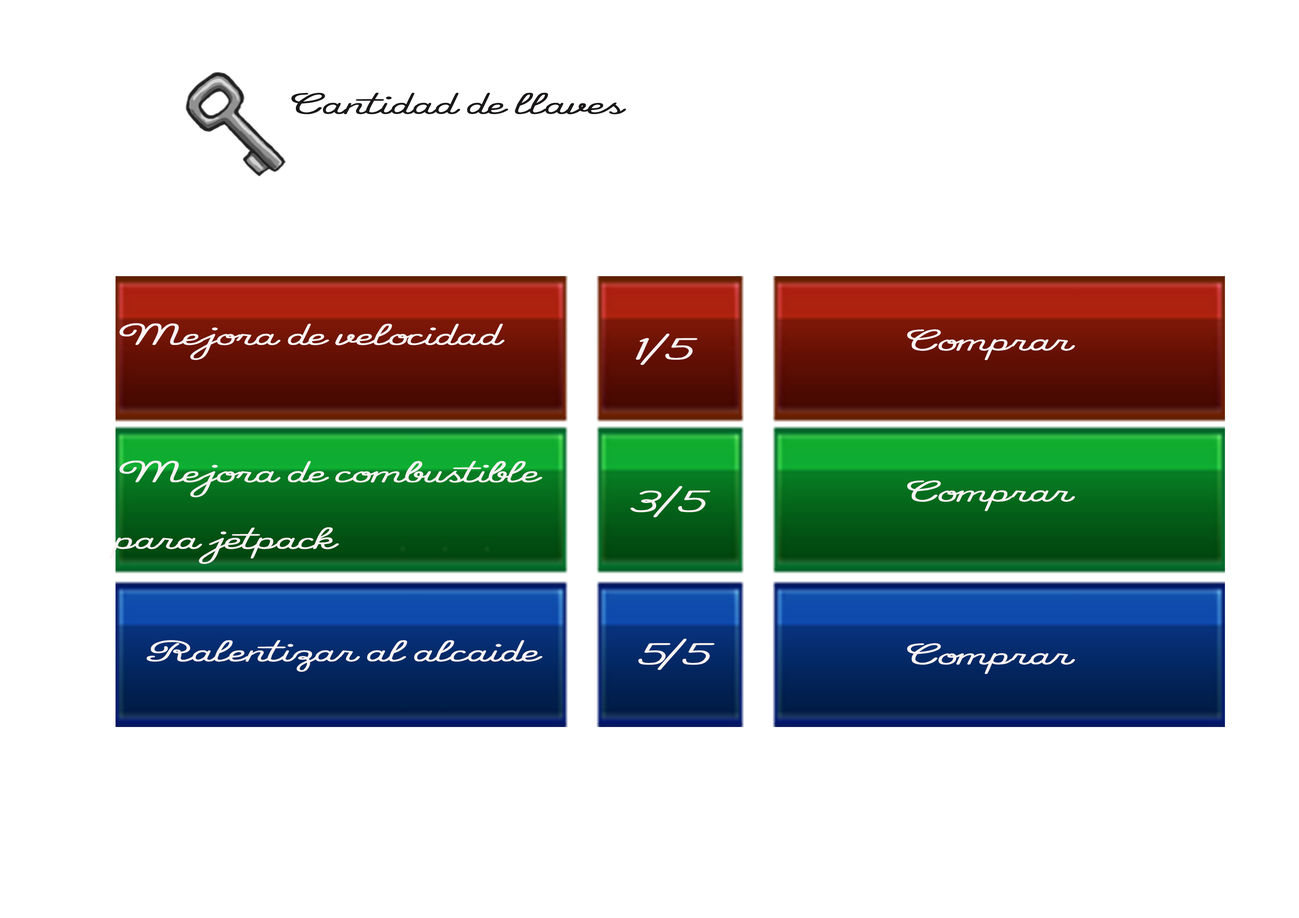
<style>
.page{position:relative;width:1299px;height:918px;background:#ffffff}
.page>*{position:absolute;margin:0}
.t1{font:27.8px "ThatsFontFolksItalic";color:#191717;scale:2 1}
.t2{font:27.8px "ThatsFontFolksItalic";color:#faf3f3;scale:2 1}
</style>
<div class="page">
<p class="t1" style="left:291px;top:93px;width:335px;height:21px">Cantidad de llaves</p>
<p class="t2" style="left:119px;top:323px;width:386px;height:37px">Mejora de velocidad</p>
<p class="t2" style="left:907px;top:329px;width:168px;height:31px">Comprar</p>
<p class="t2" style="left:636px;top:334px;width:61px;height:31px">1/5</p>
<p class="t2" style="left:109px;top:461px;width:433px;height:103px">Mejora de combustible<br>para jetpack</p>
<p class="t2" style="left:907px;top:480px;width:168px;height:31px">Comprar</p>
<p class="t2" style="left:630px;top:486px;width:80px;height:32px">3/5</p>
<p class="t2" style="left:147px;top:640px;width:395px;height:32px">Ralentizar al alcaide</p>
<p class="t2" style="left:638px;top:639px;width:77px;height:31px">5/5</p>
<p class="t2" style="left:907px;top:643px;width:168px;height:31px">Comprar</p>
</div>
